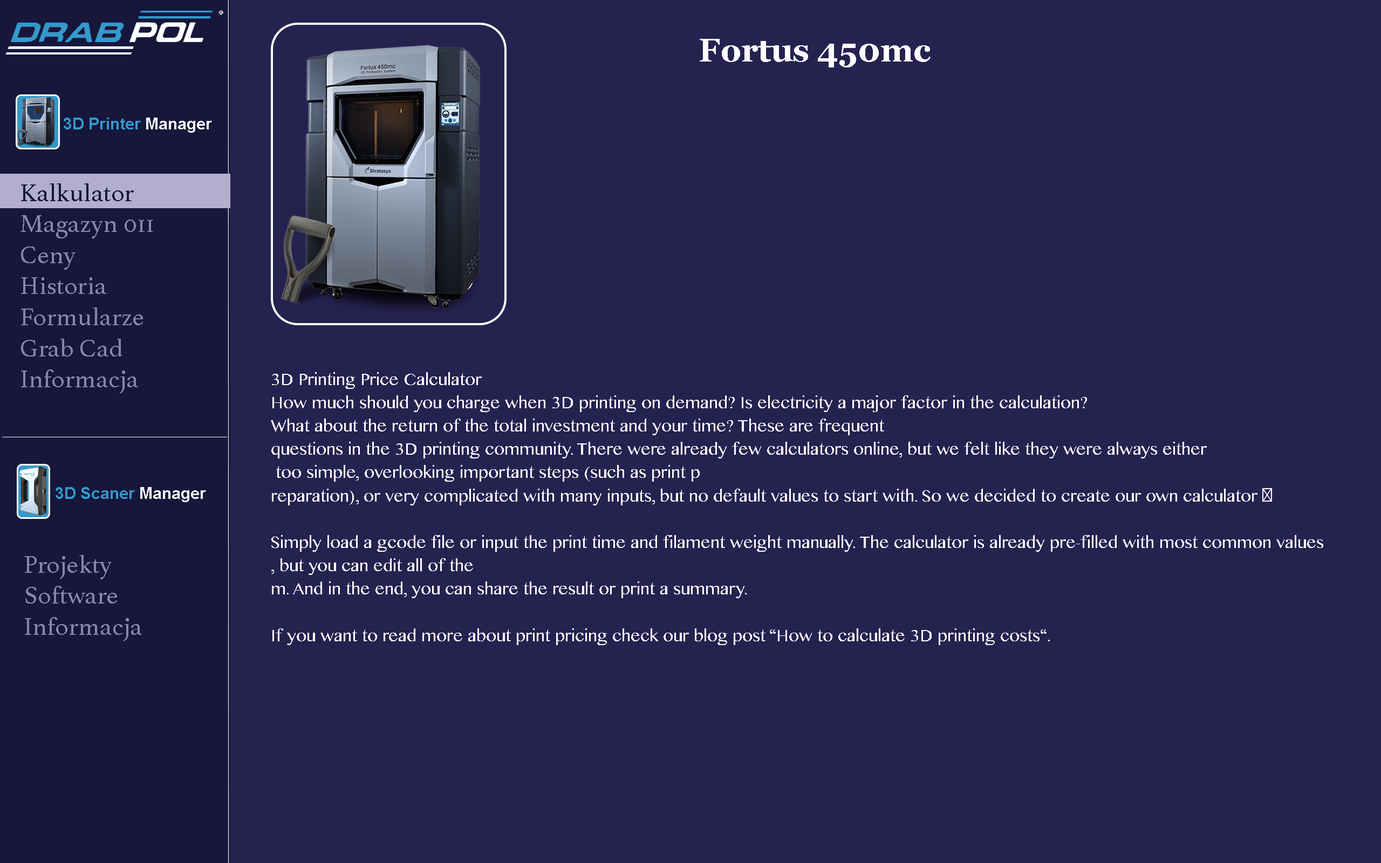
<style>
.page{position:relative;width:1381px;height:863px;background:#262250}
.page>*{position:absolute;margin:0}
.t1{font:32.4px "Georgia-Bold";color:#ffffff}
.t2{font:16.2px "Arial-BoldMT";color:#3399cc}
.t3{font:16.2px "Arial-BoldMT";color:#ffffff}
.t4{font:25.9px "Athelas-Regular";color:#8786ab}
.t5{font:25.9px "Athelas-Regular";color:#17163b}
.t6{font:19.4px "KhmerMN";color:#ffffff}
.t7{font:19.4px "MyriadPro-Regular";color:#ffffff}
</style>
<div class="page">
<p class="t1" style="left:700px;top:39px;width:231px;height:28px">Fortus 450mc</p>
<p class="t2" style="left:64px;top:118px;width:148px;height:15px">3D Printer <span class="t3">Manager</span></p>
<p class="t4" style="left:21px;top:183px;width:132px;height:211px"><span class="t5">Kalkulator<br></span>Magazyn 011<br>Ceny<br>Historia<br>Formularze<br>Grab Cad<br>Informacja</p>
<p class="t6" style="left:271px;top:372px;width:1053px;height:273px">3D Printing Price Calculator<br>How much should you charge when 3D printing on demand? Is electricity a major factor in the calculation? <br>What about the return of the total investment and your time? These are frequent <br>questions in the 3D printing community. There were already few calculators online, but we felt like they were always either<br> too simple, overlooking important steps (such as print p<br>reparation), or very complicated with many inputs, but no default values to start with. So we decided to create our own calculator <span class="t7">🙂</span><br><br>Simply load a gcode file or input the print time and filament weight manually. The calculator is already pre-filled with most common values<br>, but you can edit all of the<br>m. And in the end, you can share the result or print a summary.<br><br>If you want to read more about print pricing check our blog post “How to calculate 3D printing costs“.</p>
<p class="t2" style="left:56px;top:487px;width:150px;height:15px">3D Scaner<span class="t3"> Manager</span></p>
<p class="t4" style="left:25px;top:555px;width:117px;height:87px">Projekty<br>Software<br>Informacja</p>
</div>
